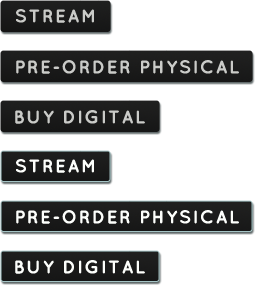
<style>
.page{position:relative;width:255px;height:285px;background:#ffffff}
.page>*{position:absolute;margin:0}
.t1{font:18.5px "QuicksandBold-Regular";letter-spacing:0.08em;color:#cacbc8}
.t2{font:18.5px "QuicksandBold-Regular";letter-spacing:0.08em;color:#fdfffc}
</style>
<div class="page">
<p class="t1" style="left:16px;top:9px;width:78px;height:14px">STREAM</p>
<p class="t1" style="left:16px;top:60px;width:223px;height:14px">PRE-ORDER PHYSICAL</p>
<p class="t1" style="left:15px;top:110px;width:130px;height:14px">BUY DIGITAL</p>
<p class="t2" style="left:16px;top:159px;width:78px;height:14px">STREAM</p>
<p class="t2" style="left:16px;top:210px;width:223px;height:14px">PRE-ORDER PHYSICAL</p>
<p class="t2" style="left:15px;top:260px;width:130px;height:14px">BUY DIGITAL</p>
</div>
